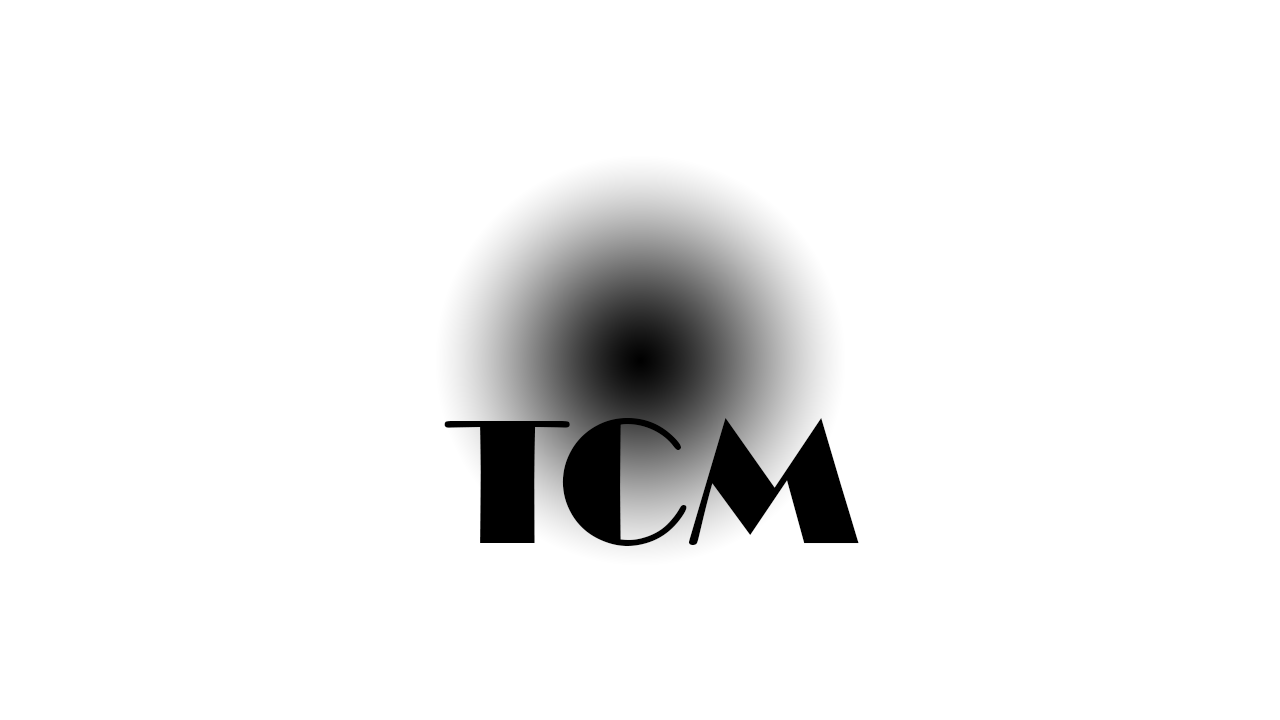
<style>
.page{position:relative;width:1280px;height:720px;background:#ffffff}
.page>*{position:absolute;margin:0}
.t1{font:182.9px "Broadway";color:#000000}
</style>
<div class="page">
<p class="t1" style="left:444px;top:418px;width:415px;height:128px">TCM</p>
</div>
